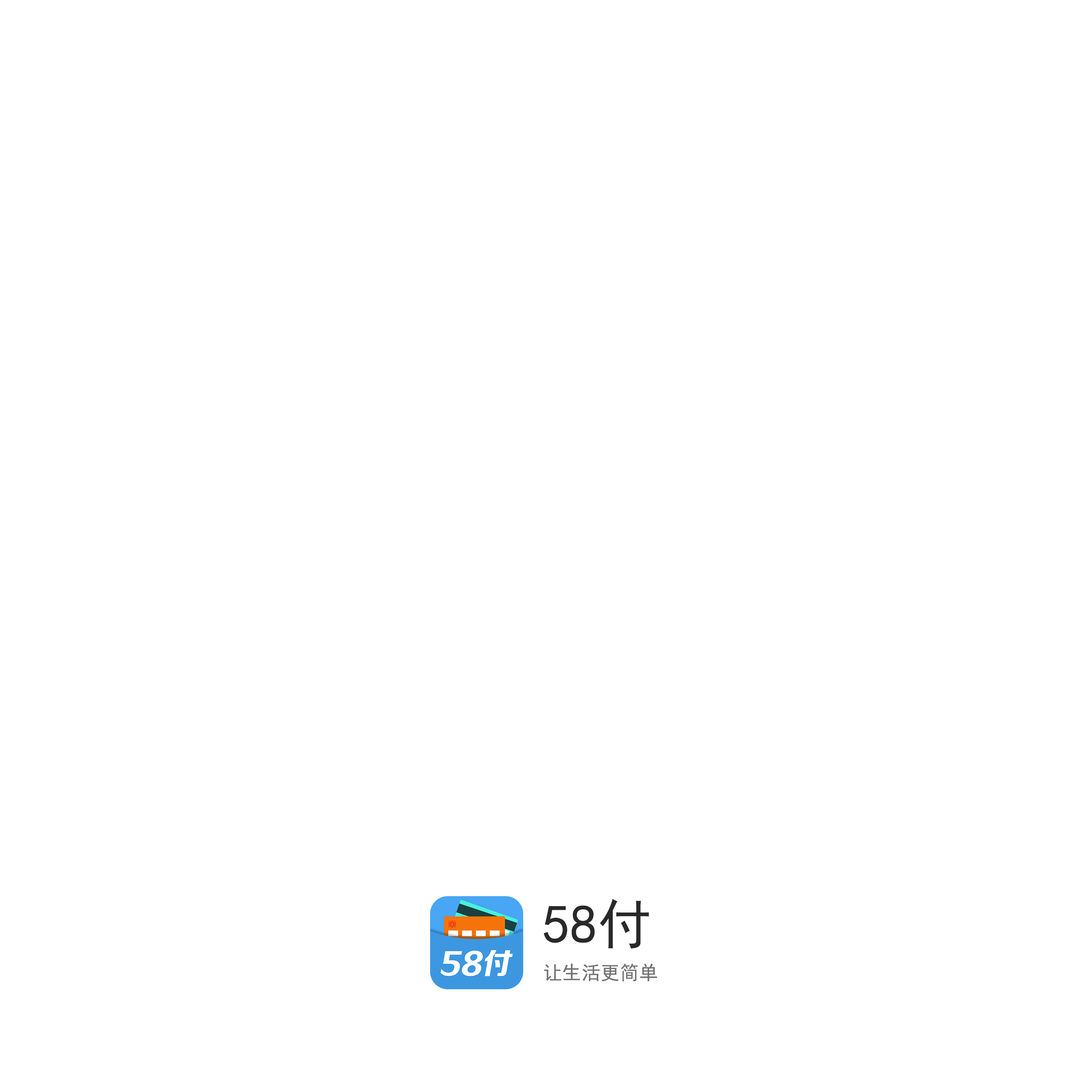
<style>
.page{position:relative;width:1092px;height:1092px;background:#ffffff}
.page>*{position:absolute;margin:0}
.t1{font:19.2px/36px "SimHei";color:#727272}
.t2{font:54.4px/36px "SimHei";color:#2a2929}
</style>
<div class="page">
<p class="t1" style="left:544px;top:899px;width:113px;height:83px"><span class="t2">58付<br></span>让生活更简单</p>
</div>
